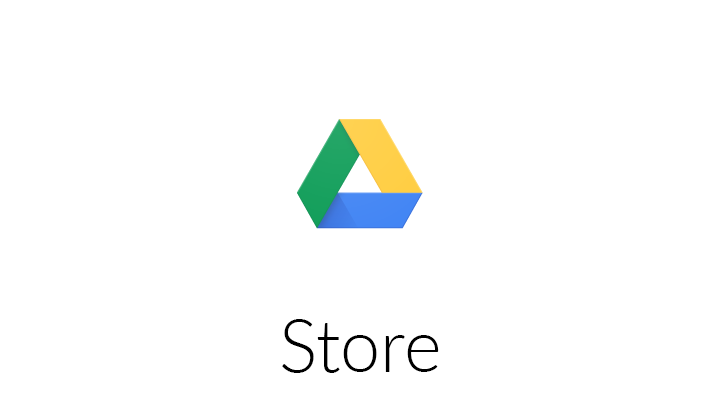
<style>
.page{position:relative;width:720px;height:400px;background:#ffffff}
.page>*{position:absolute;margin:0}
.t1{font:72px "Lato-Light";color:#000000}
</style>
<div class="page">
<p class="t1" style="left:282px;top:319px;width:157px;height:54px">Store</p>
</div>
